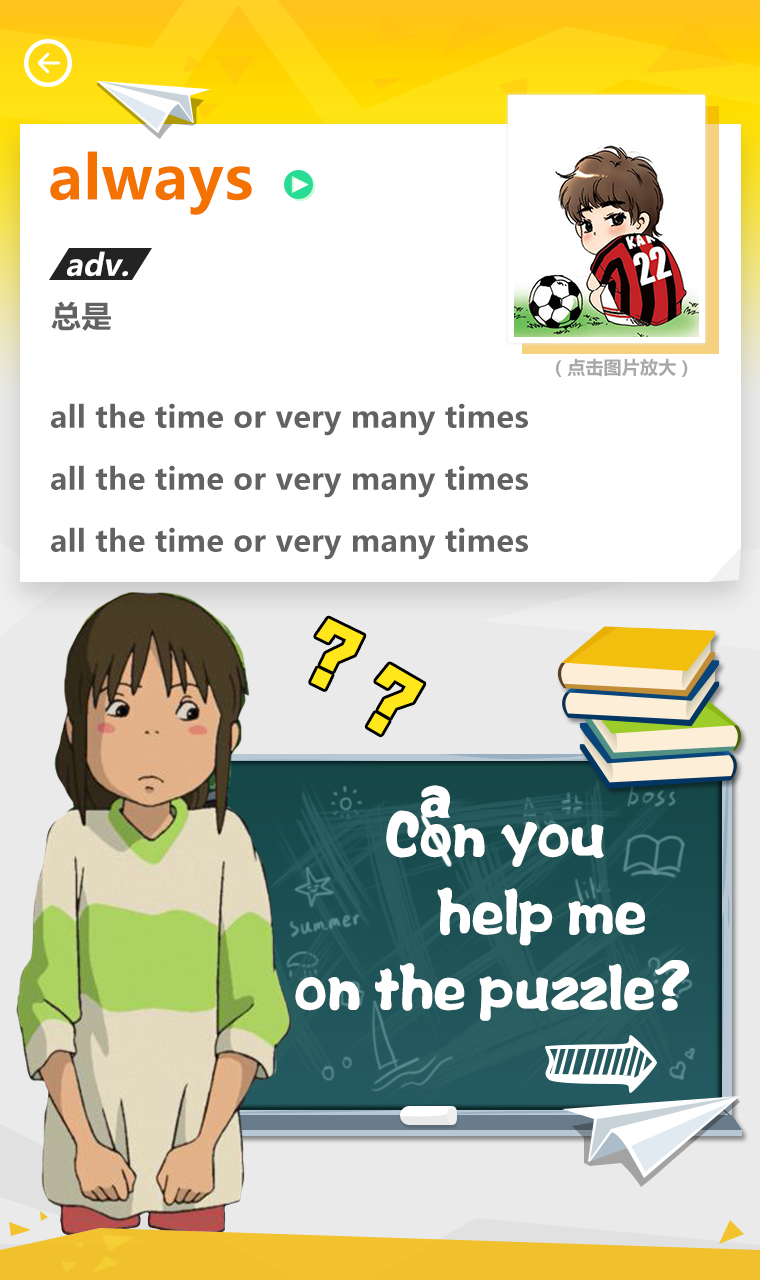
<style>
.page{position:relative;width:760px;height:1280px;background:#ffffff}
.page>*{position:absolute;margin:0}
.t1{font:60px "MicrosoftYaHei-Bold";letter-spacing:0.01em;color:#f37200}
.t2{font:30px "MicrosoftYaHei-Bold";letter-spacing:0.01em;color:#ffffff;font-style:italic}
.t3{font:30px "MicrosoftYaHei-Bold";letter-spacing:0.01em;color:#626262}
.t4{font:18px "MicrosoftYaHei-Bold";letter-spacing:0.01em;color:#a8a8a8}
.t5{font:76.1px "ShanghaiFace-Rock-BoldGB-Regular";letter-spacing:0.01em;color:#ffe71c}
.t6{font:60px "FZPWJW--GB1-0";letter-spacing:0.01em;color:#ffffff;scale:0.78 1}
</style>
<div class="page">
<p class="t1" style="left:50px;top:151px;width:202px;height:64px">always</p>
<p class="t2" style="left:67px;top:251px;width:61px;height:26px">adv.</p>
<p class="t3" style="left:51px;top:301px;width:60px;height:30px">总是</p>
<p class="t4" style="left:556px;top:358px;width:132px;height:19px">（点击图片放大）</p>
<p class="t3" style="left:51px;top:403px;width:477px;height:33px">all the time or very many times</p>
<p class="t3" style="left:51px;top:465px;width:477px;height:33px">all the time or very many times</p>
<p class="t3" style="left:51px;top:527px;width:477px;height:33px">all the time or very many times</p>
<p class="t5" style="left:311px;top:618px;width:53px;height:71px;rotate:26deg">?</p>
<p class="t5" style="left:367px;top:664px;width:57px;height:71px;rotate:30deg">?</p>
<p class="t6" style="left:420px;top:785px;width:30px;height:33px">a</p>
<p class="t6" style="left:386px;top:810px;width:218px;height:57px">Con you</p>
<p class="t6" style="left:437px;top:887px;width:208px;height:59px">help me</p>
<p class="t6" style="left:295px;top:960px;width:395px;height:61px">on the puzzle?</p>
</div>
